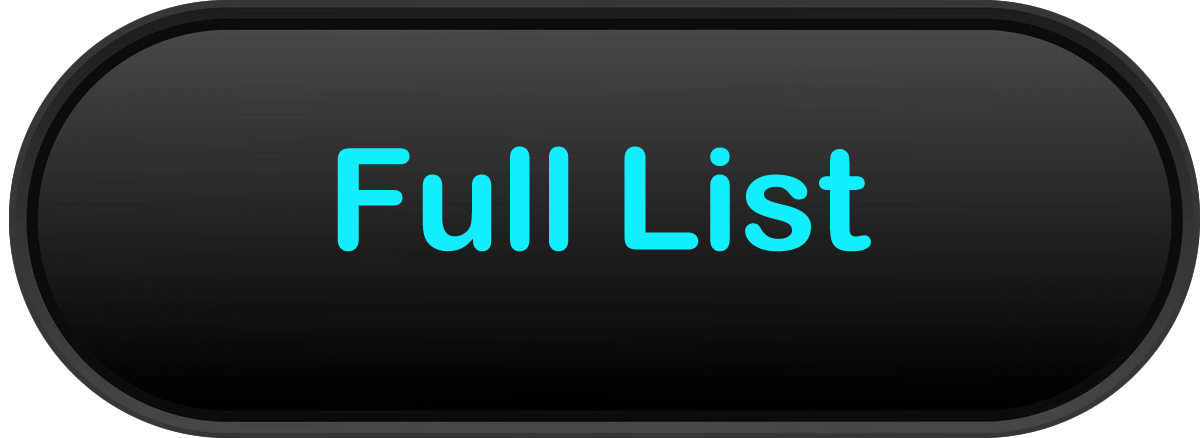
<style>
.page{position:relative;width:1200px;height:438px}
.page>*{position:absolute;margin:0}
.t1{font:141.1px "ArialRoundedMTBold";color:#12edff}
</style>
<div class="page">
<p class="t1" style="left:337px;top:146px;width:534px;height:106px">Full List</p>
</div>
